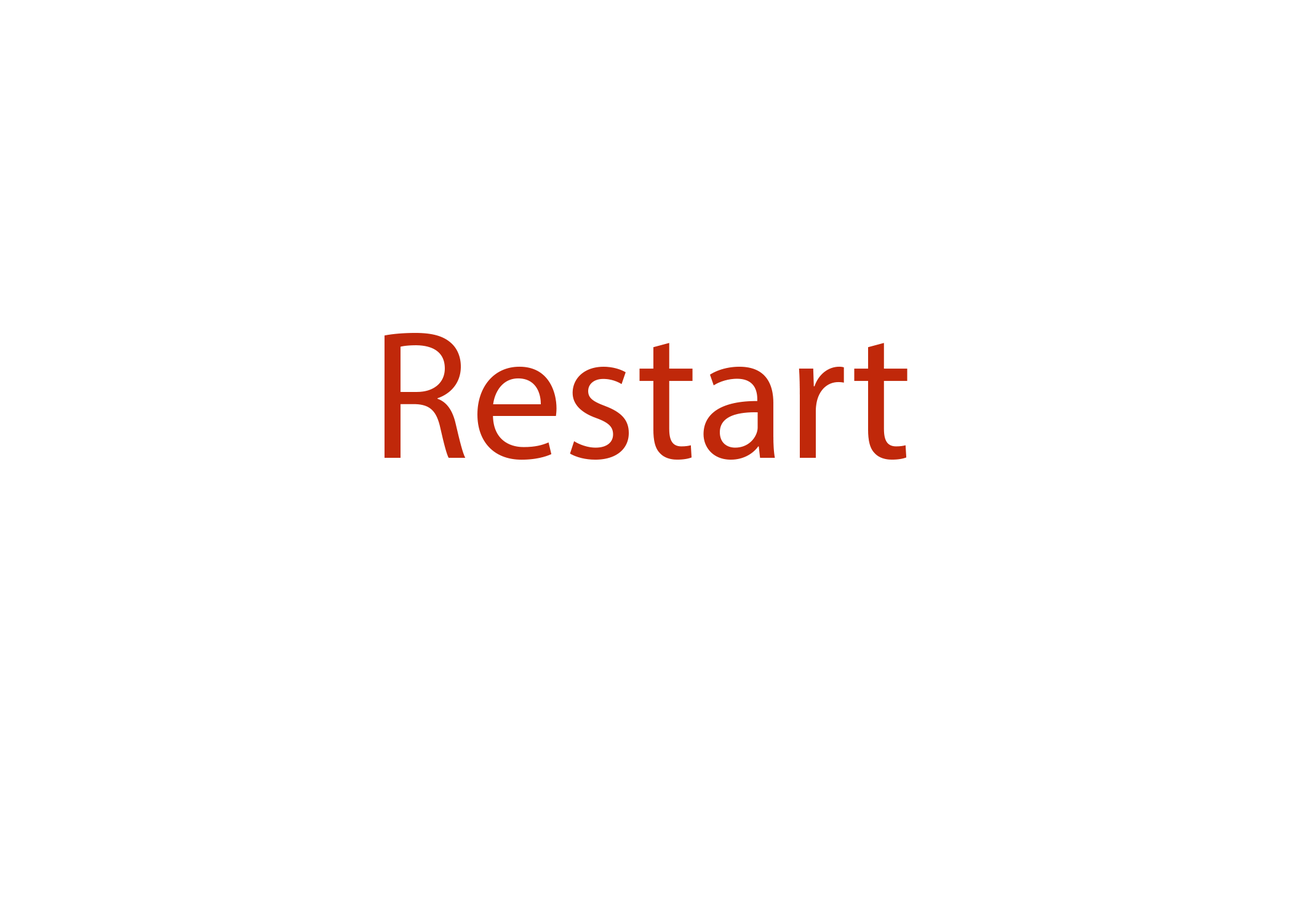
<style>
.page{position:relative;width:1292px;height:923px;background:#ffffff}
.page>*{position:absolute;margin:0}
.t1{font:184.6px "MyriadPro-Regular";color:#c0280a}
</style>
<div class="page">
<p class="t1" style="left:385px;top:333px;width:523px;height:127px">Restart</p>
</div>
